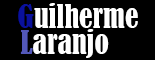
<style>
.page{position:relative;width:155px;height:60px;background:#000000}
.page>*{position:absolute;margin:0}
.t1{font:30px "BernardMT-Condensed";color:#ffffff}
.t2{font:30px "BernardMT-Condensed";color:#0a119c}
.t3{font:30px "BernardMT-Condensed";color:#5358b9}
</style>
<div class="page">
<p class="t1" style="left:18px;top:3px;width:120px;height:25px"><span class="t2">G</span>uilherme</p>
<p class="t1" style="left:20px;top:29px;width:89px;height:29px"><span class="t3">L</span>aranjo</p>
</div>
